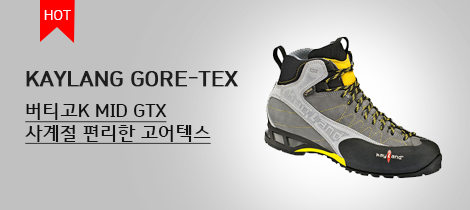
<style>
.page{position:relative;width:470px;height:210px;background:#c1c1c1}
.page>*{position:absolute;margin:0}
.t1{font:14px "HCRDotum";color:#ffffff}
.t2{font:21px "HCRDotum-Bold";color:#1e1e1e;font-weight:bold}
.t3{font:18px "HCRDotum-Bold";color:#101010;text-decoration:underline}
</style>
<div class="page">
<p class="t1" style="left:44px;top:10px;width:27px;height:10px">HOT</p>
<p class="t2" style="left:26px;top:71px;width:212px;height:16px">KAYLANG GORE-TEX</p>
<p class="t3" style="left:25px;top:103px;width:186px;height:41px">버티고K MID GTX<br>사계절 편리한 고어텍스</p>
</div>
